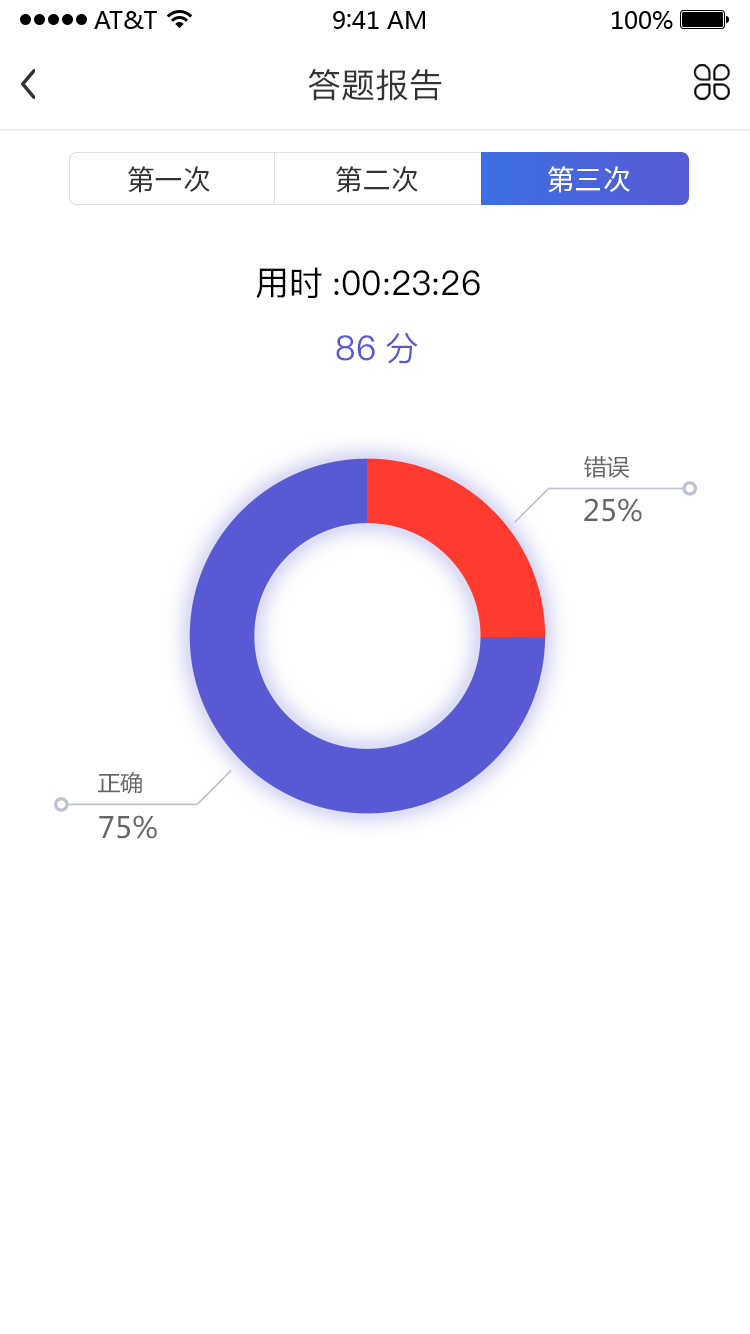
<style>
.page{position:relative;width:750px;height:1334px;background:#ffffff}
.page>*{position:absolute;margin:0}
.t1{font:34px "PingFang-SC-Medium";color:#333333}
.t2{font:28px "SourceHanSansCN-Regular";color:#333333}
.t3{font:28px "SourceHanSansCN-Regular";color:#ffffff}
.t4{font:34px "PingFang-SC-Medium";color:#000000}
.t5{font:34px "PingFang-SC-Medium";color:#595ad3}
.t6{font:22.6px "MicrosoftYaHei";color:#666666}
.t7{font:29px "MicrosoftYaHei";color:#666666}
</style>
<div class="page">
<p class="t1" style="left:308px;top:69px;width:134px;height:32px">答题报告</p>
<p class="t2" style="left:128px;top:166px;width:82px;height:27px">第一次</p>
<p class="t2" style="left:336px;top:166px;width:82px;height:27px">第二次</p>
<p class="t3" style="left:548px;top:166px;width:82px;height:27px">第三次</p>
<p class="t4" style="left:256px;top:267px;width:224px;height:31px">用时:00:23:26</p>
<p class="t5" style="left:336px;top:332px;width:82px;height:32px">86分</p>
<p class="t6" style="left:584px;top:456px;width:46px;height:22px">错误</p>
<p class="t7" style="left:584px;top:498px;width:58px;height:24px">25%</p>
<p class="t6" style="left:98px;top:772px;width:44px;height:22px">正确</p>
<p class="t7" style="left:99px;top:815px;width:58px;height:24px">75%</p>
</div>
